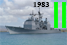
<style>
.page{position:relative;width:67px;height:45px}
.page>*{position:absolute;margin:0}
.t1{font:10.3px "Aparajita-Bold";color:#000000}
</style>
<div class="page">
<p class="t1" style="left:33px;top:2px;width:17px;height:5px">1983</p>
</div>
